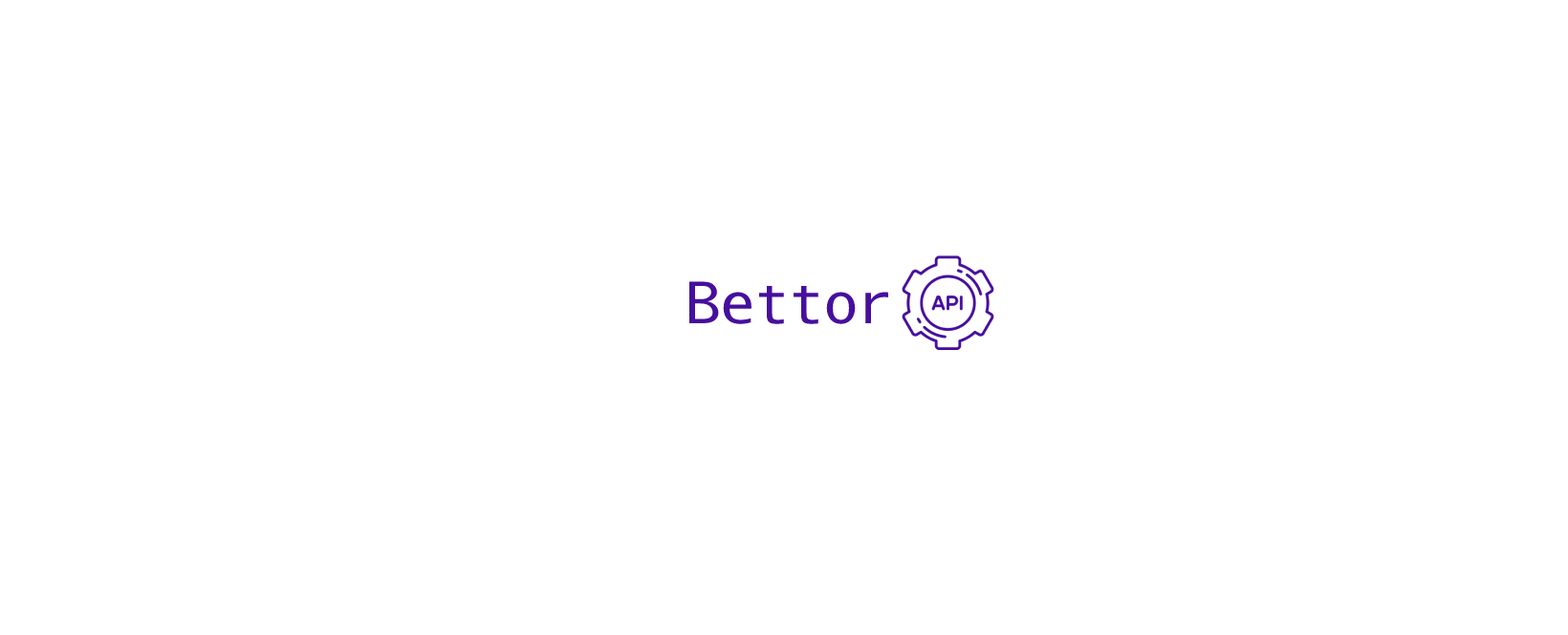
<style>
.page{position:relative;width:1568px;height:635px;background:#ffffff}
.page>*{position:absolute;margin:0}
.t1{font:57.4px "AurulentSansMono-Regular";color:#460f9d}
</style>
<div class="page">
<p class="t1" style="left:689px;top:281px;width:200px;height:43px">Bettor</p>
</div>
